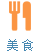
<style>
.page{position:relative;width:40px;height:55px;background:#ffffff}
.page>*{position:absolute;margin:0}
.t1{font:22.5px "SimSun";letter-spacing:0.1em;color:#4788b2;font-variant:small-caps}
</style>
<div class="page">
<p class="t1" style="left:7px;top:39px;width:26px;height:12px">美食</p>
</div>
